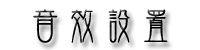
<style>
.page{position:relative;width:200px;height:50px;background:#ffffff}
.page>*{position:absolute;margin:0}
.t1{font:36px "DFJinWen-W3-WIN-BF";color:#000000;font-weight:bold}
</style>
<div class="page">
<p class="t1" style="left:33px;top:9px;width:135px;height:34px">音效設置</p>
</div>
